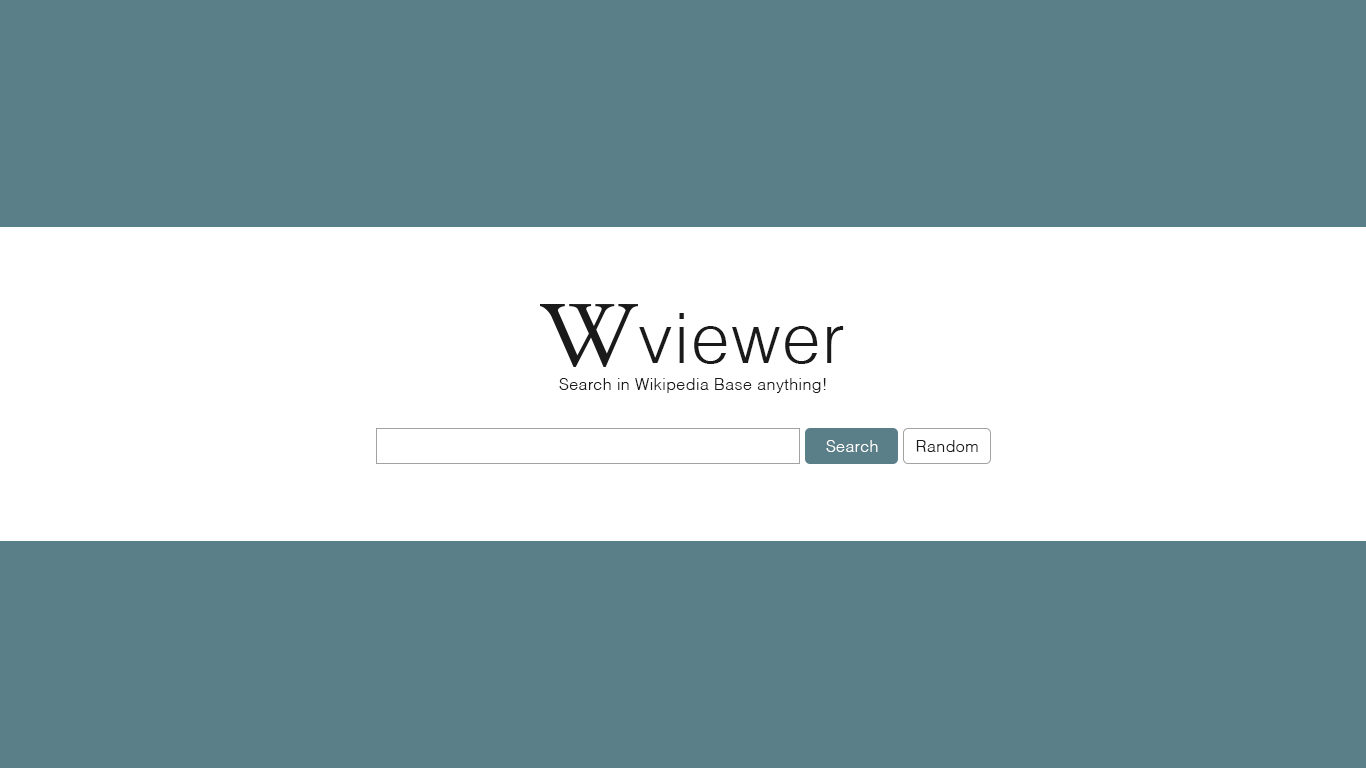
<style>
.page{position:relative;width:1366px;height:768px;background:#5a7f88}
.page>*{position:absolute;margin:0}
.t1{font:68.8px "Helvetica-Light";letter-spacing:0.025em;color:#1a1a1a}
.t2{font:16.1px "Helvetica-Light";letter-spacing:0.025em;color:#1a1a1a}
.t3{font:16.1px "Helvetica-Light";letter-spacing:0.025em;color:#ffffff}
</style>
<div class="page">
<p class="t1" style="left:639px;top:313px;width:205px;height:51px">viewer</p>
<p class="t2" style="left:559px;top:378px;width:267px;height:15px">Search in Wikipedia Base anything!</p>
<p class="t3" style="left:826px;top:440px;width:52px;height:12px">Search</p>
<p class="t2" style="left:916px;top:440px;width:62px;height:12px">Random</p>
</div>
